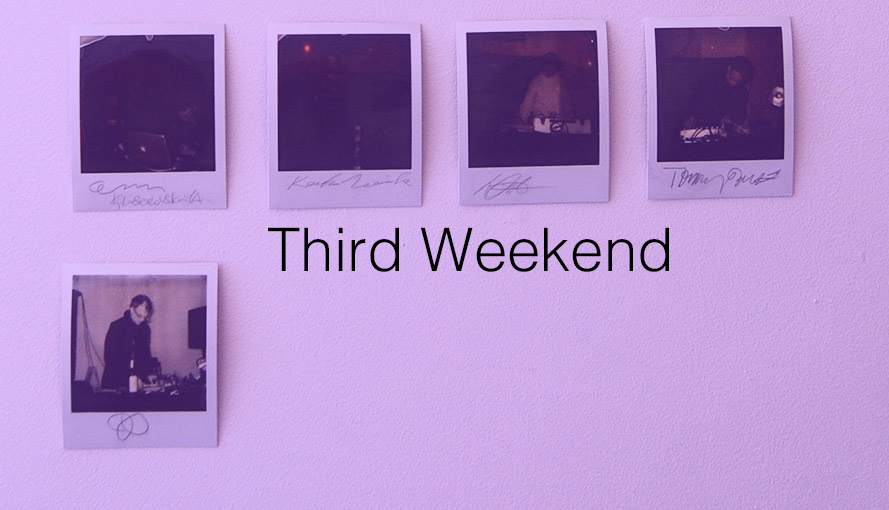
<style>
.page{position:relative;width:889px;height:510px}
.page>*{position:absolute;margin:0}
.t1{font:60px "Helvetica-Light";color:#000000}
</style>
<div class="page">
<p class="t1" style="left:268px;top:227px;width:401px;height:45px">Third Weekend</p>
</div>
